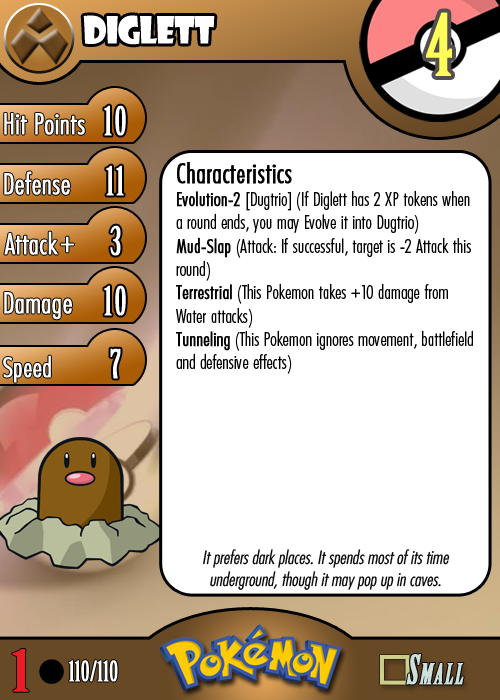
<style>
.page{position:relative;width:500px;height:700px;background:#ffffff}
.page>*{position:absolute;margin:0}
.t1{font:36.7px "ShowcardGothic-Reg";letter-spacing:-0.025em;color:#ffffff;scale:0.91 1}
.t2{font:83.3px "BirchStd";letter-spacing:0.025em;color:#fffd59;font-weight:bold}
.t3{font:27.8px "Futura-CondensedLight";color:#ffffff;font-weight:bold}
.t4{font:38.9px "BirchStd";letter-spacing:0.035em;color:#ffffff;font-weight:bold}
.t5{font:19.4px "FuturaCondensedBQ-Light";color:#010101}
.t6{font:27.8px "FuturaCondensedBQ-Light";color:#010101;font-weight:bold}
.t7{font:19.4px "FuturaCondensedBQ-Light";color:#010101;font-weight:bold}
.t8{font:30.6px "Futura-CondensedLight";color:#ffffff;font-weight:bold}
.t9{font:27.8px "FuturaCondensedBQ-Light";color:#ffffff;font-weight:bold}
.t10{font:18.1px "Futura-CondensedLight";color:#010101;font-style:italic}
.t11{font:55.6px "BirchStd";color:#ed1c24;font-weight:bold;scale:1.5 1}
.t12{font:27.8px "BirchStd";color:#ffffff;font-weight:bold}
</style>
<div class="page">
<p class="t1" style="left:83px;top:15px;width:132px;height:30px">diglett</p>
<p class="t2" style="left:426px;top:12px;width:26px;height:64px">4</p>
<p class="t3" style="left:4px;top:113px;width:81px;height:22px">Hit Points</p>
<p class="t4" style="left:104px;top:105px;width:22px;height:31px">10</p>
<p class="t3" style="left:4px;top:171px;width:66px;height:24px">Defense</p>
<p class="t4" style="left:106px;top:165px;width:18px;height:31px">11</p>
<p class="t5" style="left:176px;top:162px;width:297px;height:212px"><span class="t6">Characteristics<br></span><span class="t7">Evolution-2 </span>[Dugtrio] (If Diglett has 2 XP tokens when a round ends, you may Evolve it into Dugtrio)<br><span class="t7">Mud-Slap</span> (Attack: If successful, target is -2 Attack this round)<br><span class="t7">Terrestrial</span> (This Pokemon takes +10 damage from Water attacks)<br><span class="t7">Tunneling</span> (This Pokemon ignores movement, battlefield and defensive effects)</p>
<p class="t3" style="left:4px;top:231px;width:54px;height:24px">Attack</p>
<p class="t4" style="left:110px;top:225px;width:11px;height:31px">3</p>
<p class="t8" style="left:60px;top:236px;width:14px;height:17px">+</p>
<p class="t3" style="left:4px;top:292px;width:68px;height:28px">Damage</p>
<p class="t4" style="left:104px;top:285px;width:22px;height:31px">10</p>
<p class="t4" style="left:110px;top:348px;width:11px;height:31px">7</p>
<p class="t9" style="left:3px;top:355px;width:48px;height:28px">Speed</p>
<p class="t10" style="left:203px;top:549px;width:247px;height:41px;text-align:center">It prefers dark places. It spends most of its time underground, though it may pop up in caves.</p>
<p class="t11" style="left:12px;top:649px;width:17px;height:43px">1</p>
<p class="t12" style="left:68px;top:660px;width:50px;height:22px">110/110</p>
</div>
